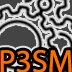
<style>
.page{position:relative;width:72px;height:72px}
.page>*{position:absolute;margin:0}
.t1{font:32px "MyriadPro-Regular";color:#ff6f00}
</style>
<div class="page">
<p class="t1" style="left:0px;top:50px;width:72px;height:23px">P3SM</p>
</div>
